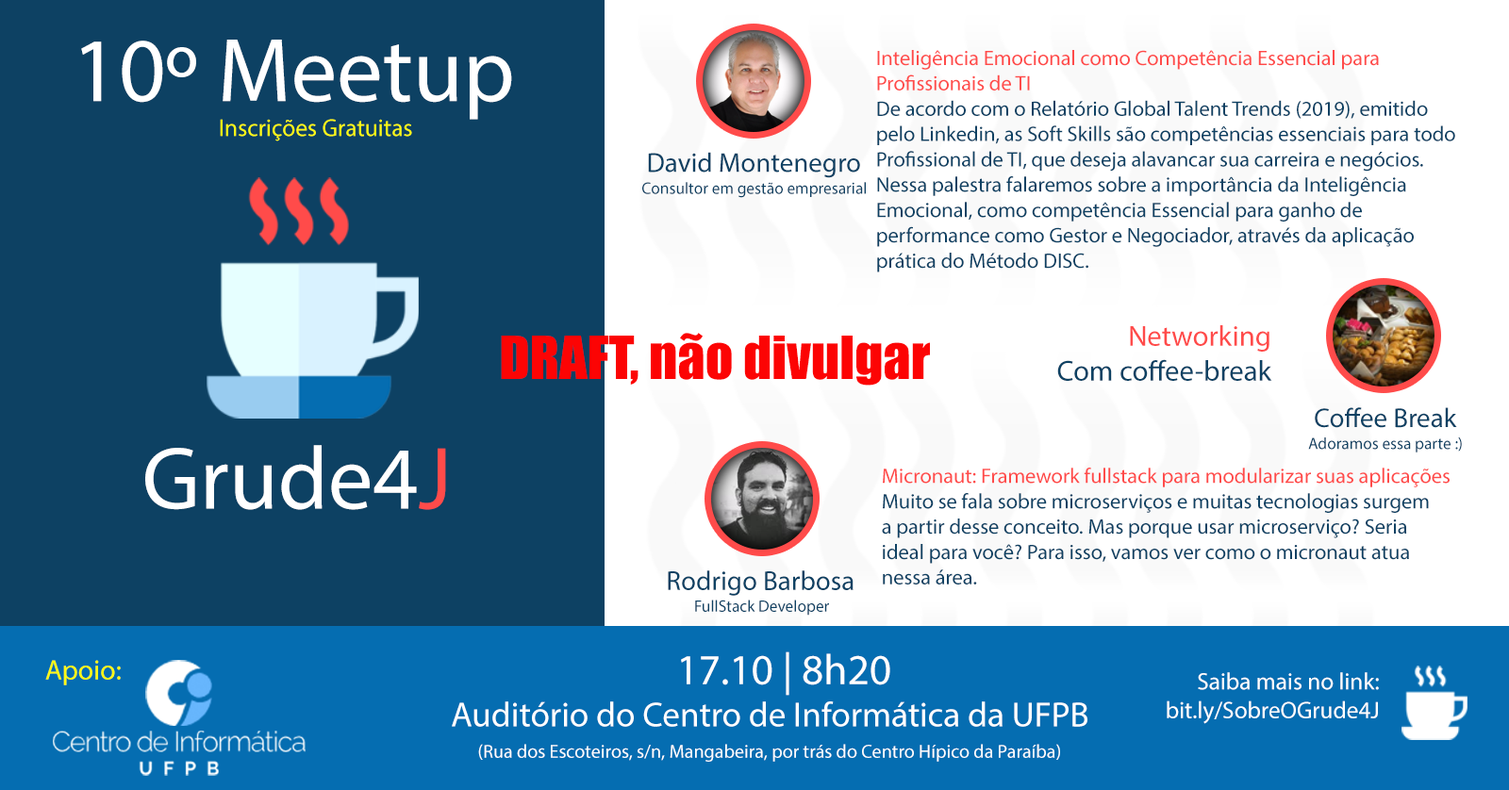
<style>
.page{position:relative;width:1509px;height:790px;background:#0d4163}
.page>*{position:absolute;margin:0}
.t1{font:91.3px "MyriadPro-Regular";color:#ffffff}
.t2{font:21.1px "MyriadPro-Regular";color:#0d4163}
.t3{font:21.1px "MyriadPro-Regular";color:#ff4b4a}
.t4{font:24.4px "MyriadPro-Regular";color:#fcfb14}
.t5{font:27.3px "MyriadPro-Regular";color:#0d4163}
.t6{font:16.4px "MyriadPro-Regular";color:#0d4163}
.t7{font:29px "MyriadPro-Regular";color:#0d4163}
.t8{font:29px "MyriadPro-Regular";color:#ff4b4a}
.t9{font:55px "Impact";color:#fc0404}
.t10{font:89.3px "MyriadPro-Regular";color:#ffffff}
.t11{font:89.3px "MyriadPro-Regular";color:#ff4b4a}
.t12{font:42.8px "MyriadPro-Regular";color:#ffffff}
.t13{font:28.2px "MyriadPro-Regular";color:#fcfb14}
.t14{font:23.9px "MyriadPro-Regular";color:#ffffff}
.t15{font:35px "MyriadPro-Regular";color:#ffffff}
.t16{font:18.9px "MyriadPro-Regular";color:#ffffff}
</style>
<div class="page">
<p class="t1" style="left:81px;top:40px;width:431px;height:80px">10º Meetup</p>
<p class="t2" style="left:877px;top:50px;width:578px;height:223px"><span class="t3">Inteligência Emocional como Competência Essencial para <br>Profissionais de TI<br></span>De acordo com o Relatório Global Talent Trends (2019), emitido <br>pelo Linkedin, as Soft Skills são competências essenciais para todo <br>Profissional de TI, que deseja alavancar sua carreira e negócios. <br>Nessa palestra falaremos sobre a importância da Inteligência <br>Emocional, como competência Essencial para ganho de <br>performance como Gestor e Negociador, através da aplicação <br>prática do Método DISC.</p>
<p class="t4" style="left:220px;top:119px;width:192px;height:22px">Inscrições Gratuitas</p>
<p class="t5" style="left:648px;top:152px;width:212px;height:26px">David Montenegro</p>
<p class="t6" style="left:642px;top:182px;width:224px;height:16px">Consultor em gestão empresarial</p>
<p class="t7" style="left:1057px;top:325px;width:215px;height:56px;text-align:right"><span class="t8">Networking<br></span>Com coffee-break</p>
<p class="t9" style="left:501px;top:333px;width:429px;height:53px">DRAFT, não divulgar</p>
<p class="t5" style="left:1315px;top:407px;width:142px;height:21px">Coffee Break</p>
<p class="t6" style="left:1308px;top:438px;width:154px;height:15px">Adoramos essa parte :)</p>
<p class="t10" style="left:145px;top:445px;width:301px;height:65px">Grude4<span class="t11">J</span></p>
<p class="t2" style="left:882px;top:468px;width:567px;height:117px"><span class="t3">Micronaut: Framework fullstack para modularizar suas aplicações<br></span>Muito se fala sobre microserviços e muitas tecnologias surgem <br>a partir desse conceito. Mas porque usar microserviço? Seria <br>ideal para você? Para isso, vamos ver como o micronaut atua <br>nessa área.</p>
<p class="t5" style="left:668px;top:571px;width:185px;height:25px">Rodrigo Barbosa</p>
<p class="t6" style="left:695px;top:600px;width:134px;height:16px">FullStack Developer</p>
<p class="t12" style="left:681px;top:652px;width:209px;height:44px">17.10 | 8h20</p>
<p class="t13" style="left:45px;top:660px;width:76px;height:26px">Apoio:</p>
<p class="t14" style="left:1167px;top:672px;width:212px;height:52px;text-align:right">Saiba mais no link:<br>bit.ly/SobreOGrude4J</p>
<p class="t15" style="left:452px;top:702px;width:635px;height:25px">Auditório do Centro de Informática da UFPB</p>
<p class="t16" style="left:478px;top:744px;width:582px;height:18px">(Rua dos Escoteiros, s/n, Mangabeira, por trás do Centro Hípico da Paraíba)</p>
</div>
